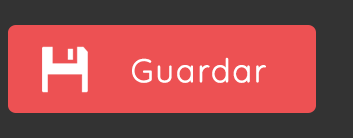
<style>
.page{position:relative;width:353px;height:138px;background:#ed5153}
.page>*{position:absolute;margin:0}
.t1{font:32px "Quicksand-Light";letter-spacing:0.05em;color:#ffffff;font-weight:bold}
</style>
<div class="page">
<p class="t1" style="left:132px;top:57px;width:134px;height:26px">Guardar</p>
</div>
